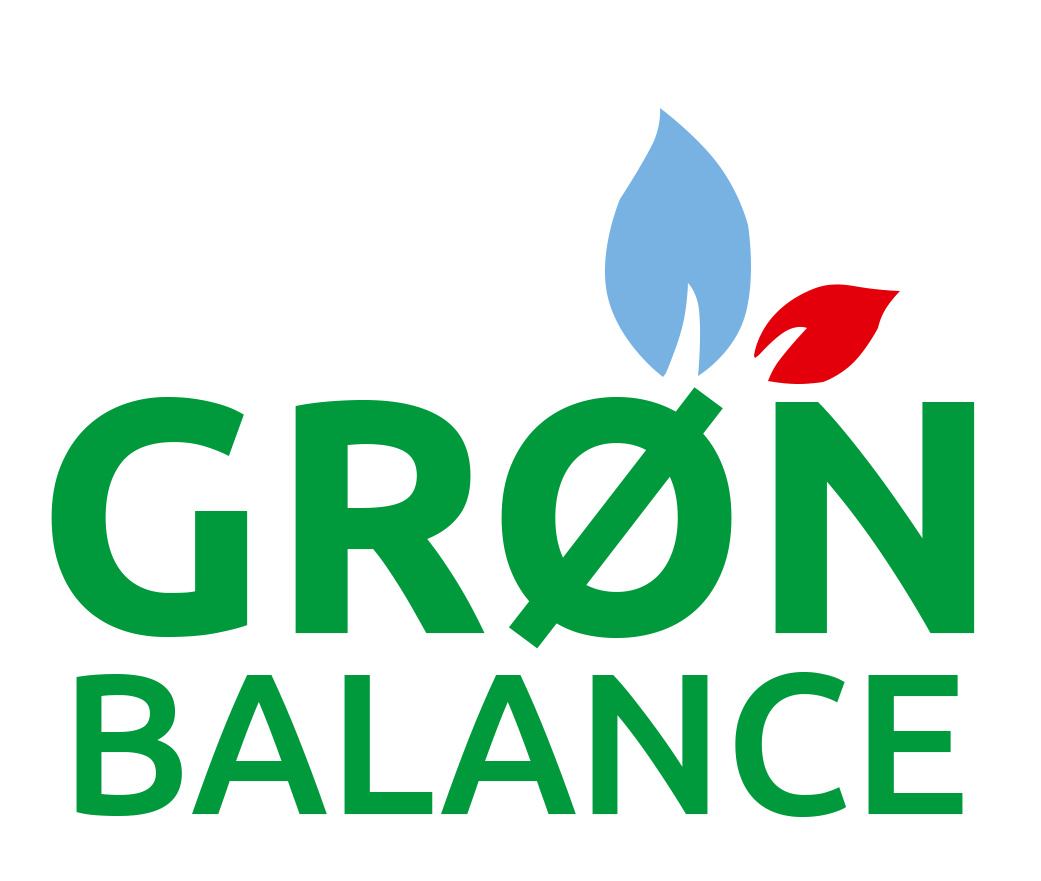
<style>
.page{position:relative;width:1041px;height:881px;background:#ffffff}
.page>*{position:absolute;margin:0}
.t1{font:333.3px "Ubuntu-Bold";color:#00993c}
.t2{font:200px "Ubuntu-Medium";color:#00993c}
</style>
<div class="page">
<p class="t1" style="left:51px;top:387px;width:924px;height:262px">GRØN</p>
<p class="t2" style="left:76px;top:672px;width:887px;height:145px">BALANCE</p>
</div>
